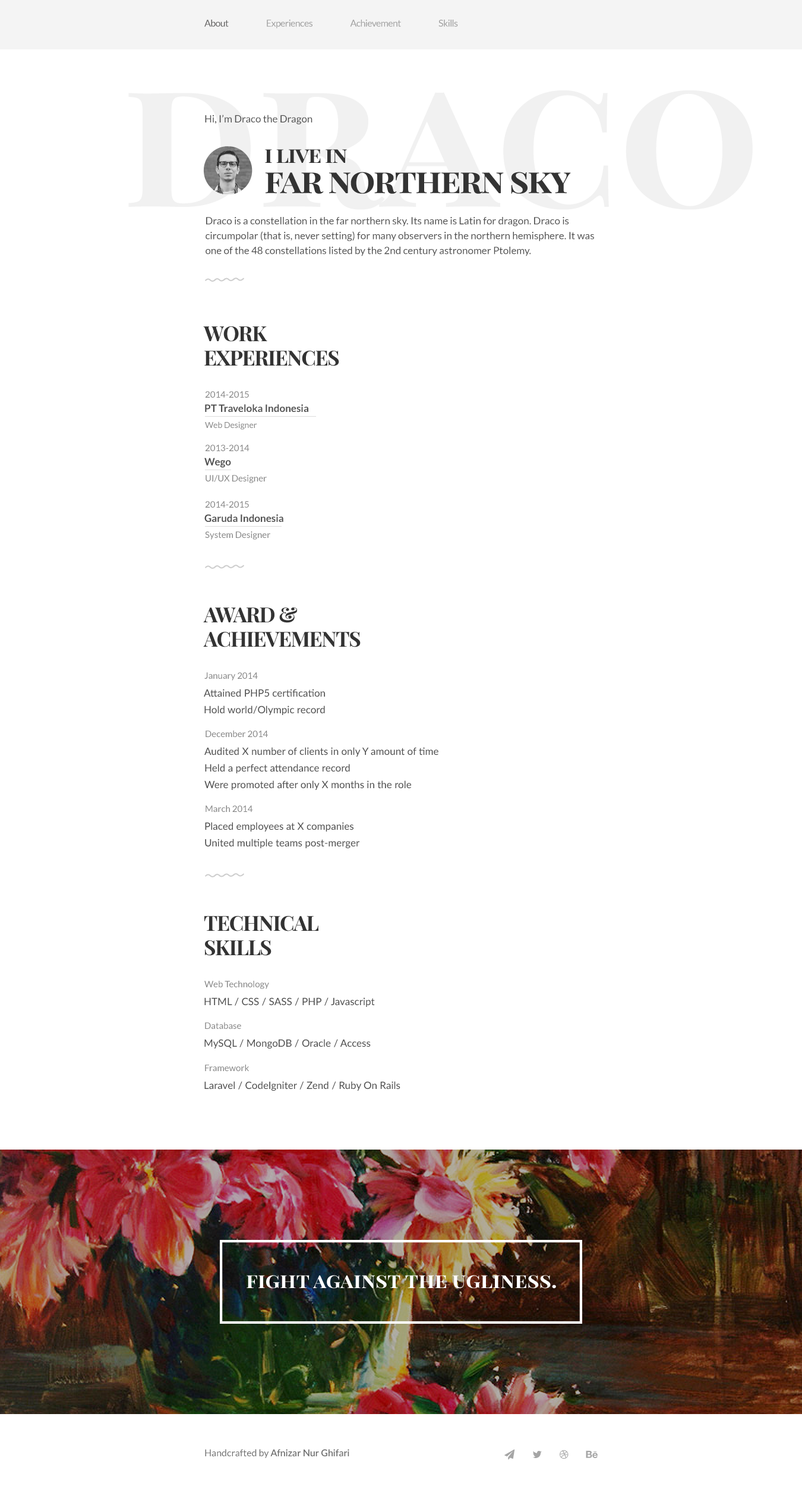
<style>
.page{position:relative;width:802px;height:1486px;background:#ffffff}
.page>*{position:absolute;margin:0}
.t1{font:9.5px "Lato-Regular";letter-spacing:-0.04em;color:#9f9f9f}
.t2{font:9.5px "Lato-Regular";letter-spacing:-0.04em;color:#616060}
.t3{font:10.1px "Lato-Regular";color:#4e4e4e}
.t4{font:33.9px/30.3px "PlayfairDisplaySC-Bold";letter-spacing:-0.04em;color:#333333}
.t5{font:22px/30.3px "PlayfairDisplaySC-Bold";letter-spacing:-0.04em;color:#333333}
.t6{font:10.1px/14.9px "Lato-Regular";color:#4e4e4e}
.t7{font:20.8px/24.4px "PlayfairDisplaySC-Bold";letter-spacing:-0.04em;color:#333333}
.t8{font:8.9px "Lato-Regular";color:#848484}
.t9{font:10.1px "Lato-Bold";color:#4f4f4f}
.t10{font:8.3px "Lato-Regular";color:#848484}
.t11{font:10.1px/16.6px "Lato-Medium";color:#4f4f4f}
.t12{font:10.1px "Lato-Medium";color:#4f4f4f}
.t13{font:20.8px "PlayfairDisplaySC-Bold";color:#ffffff}
.t14{font:9.5px "Lato-Semibold";color:#6d6d6d}
.t15{font:9.5px "Lato-Regular";color:#6d6d6d}
</style>
<div class="page">
<p class="t1" style="left:204px;top:20px;width:254px;height:9px"><span class="t2">About</span> Experiences Achievement Skills</p>
<p class="t3" style="left:205px;top:115px;width:108px;height:9px">Hi, I’m Draco the Dragon</p>
<p class="t4" style="left:265px;top:149px;width:306px;height:45px"><span class="t5">i live in<br></span>far northern sky</p>
<p class="t6" style="left:206px;top:217px;width:388px;height:39px">Draco is a constellation in the far northern sky. Its name is Latin for dragon. Draco is circumpolar (that is, never setting) for many observers in the northern hemisphere. It was one of the 48 constellations listed by the 2nd century astronomer Ptolemy.</p>
<p class="t7" style="left:203px;top:326px;width:136px;height:40px">WORK<br>EXPERIENCES</p>
<p class="t8" style="left:205px;top:391px;width:44px;height:7px">2014-2015</p>
<p class="t9" style="left:205px;top:404px;width:103px;height:8px">PT Traveloka Indonesia</p>
<p class="t10" style="left:205px;top:421px;width:52px;height:9px">Web Designer</p>
<p class="t8" style="left:205px;top:445px;width:45px;height:6px">2013-2014</p>
<p class="t9" style="left:204px;top:458px;width:27px;height:10px">Wego</p>
<p class="t8" style="left:206px;top:475px;width:61px;height:8px">UI/UX Designer</p>
<p class="t8" style="left:205px;top:501px;width:44px;height:7px">2014-2015</p>
<p class="t9" style="left:204px;top:514px;width:80px;height:8px">Garuda Indonesia</p>
<p class="t8" style="left:205px;top:531px;width:65px;height:9px">System Designer</p>
<p class="t7" style="left:203px;top:607px;width:158px;height:40px">AWARD &amp;<br>ACHIEVEMENTS</p>
<p class="t8" style="left:204px;top:672px;width:54px;height:9px">January 2014</p>
<p class="t11" style="left:204px;top:689px;width:121px;height:26px">Attained PHP5 certification<br>Hold world/Olympic record</p>
<p class="t8" style="left:206px;top:731px;width:62px;height:6px">December 2014</p>
<p class="t11" style="left:204px;top:747px;width:235px;height:43px">Audited X number of clients in only Y amount of time<br>Held a perfect attendance record<br>Were promoted after only X months in the role</p>
<p class="t8" style="left:206px;top:805px;width:47px;height:7px">March 2014</p>
<p class="t11" style="left:205px;top:822px;width:155px;height:26px">Placed employees at X companies<br>United multiple teams post-merger</p>
<p class="t7" style="left:204px;top:916px;width:115px;height:40px">TECHNICAL<br>SKILLS</p>
<p class="t8" style="left:204px;top:981px;width:65px;height:8px">Web Technology</p>
<p class="t12" style="left:204px;top:997px;width:171px;height:10px">HTML / CSS / SASS / PHP / Javascript</p>
<p class="t8" style="left:205px;top:1022px;width:36px;height:7px">Database</p>
<p class="t12" style="left:204px;top:1039px;width:167px;height:10px">MySQL / MongoDB / Oracle / Access</p>
<p class="t8" style="left:205px;top:1065px;width:44px;height:6px">Framework</p>
<p class="t12" style="left:204px;top:1081px;width:197px;height:10px">Laravel / CodeIgniter / Zend / Ruby On Rails</p>
<p class="t13" style="left:247px;top:1275px;width:309px;height:14px">fight against the ugliness.</p>
<p class="t14" style="left:205px;top:1449px;width:145px;height:9px"><span class="t15">Handcrafted by </span>Afnizar Nur Ghifari</p>
</div>
